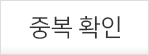
<style>
.page{position:relative;width:149px;height:55px;background:#ffffff}
.page>*{position:absolute;margin:0}
.t1{font:24px "NanumSquareR";color:#333333}
</style>
<div class="page">
<p class="t1" style="left:29px;top:15px;width:92px;height:24px">중복 확인</p>
</div>
